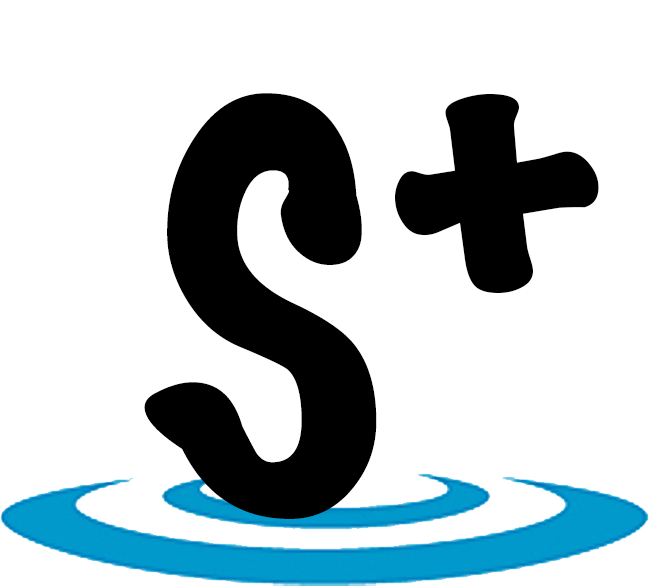
<style>
.page{position:relative;width:649px;height:586px;background:#ffffff}
.page>*{position:absolute;margin:0}
.t1{font:500px "MarkerFelt-Thin";color:#000000}
</style>
<div class="page">
<p class="t1" style="left:144px;top:93px;width:233px;height:426px">S</p>
<p class="t1" style="left:395px;top:94px;width:204px;height:199px">+</p>
</div>
